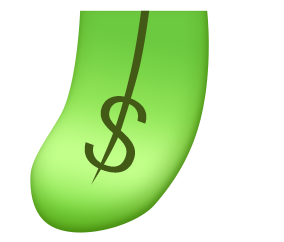
<style>
.page{position:relative;width:284px;height:242px;background:#ffffff}
.page>*{position:absolute;margin:0}
.t1{font:110px "AcuminConcept-CondensedLight";letter-spacing:0.025em;color:#435916;text-transform:uppercase;scale:1.3 1}
</style>
<div class="page">
<p class="t1" style="left:84px;top:96px;width:63px;height:77px;rotate:20deg">S</p>
</div>
